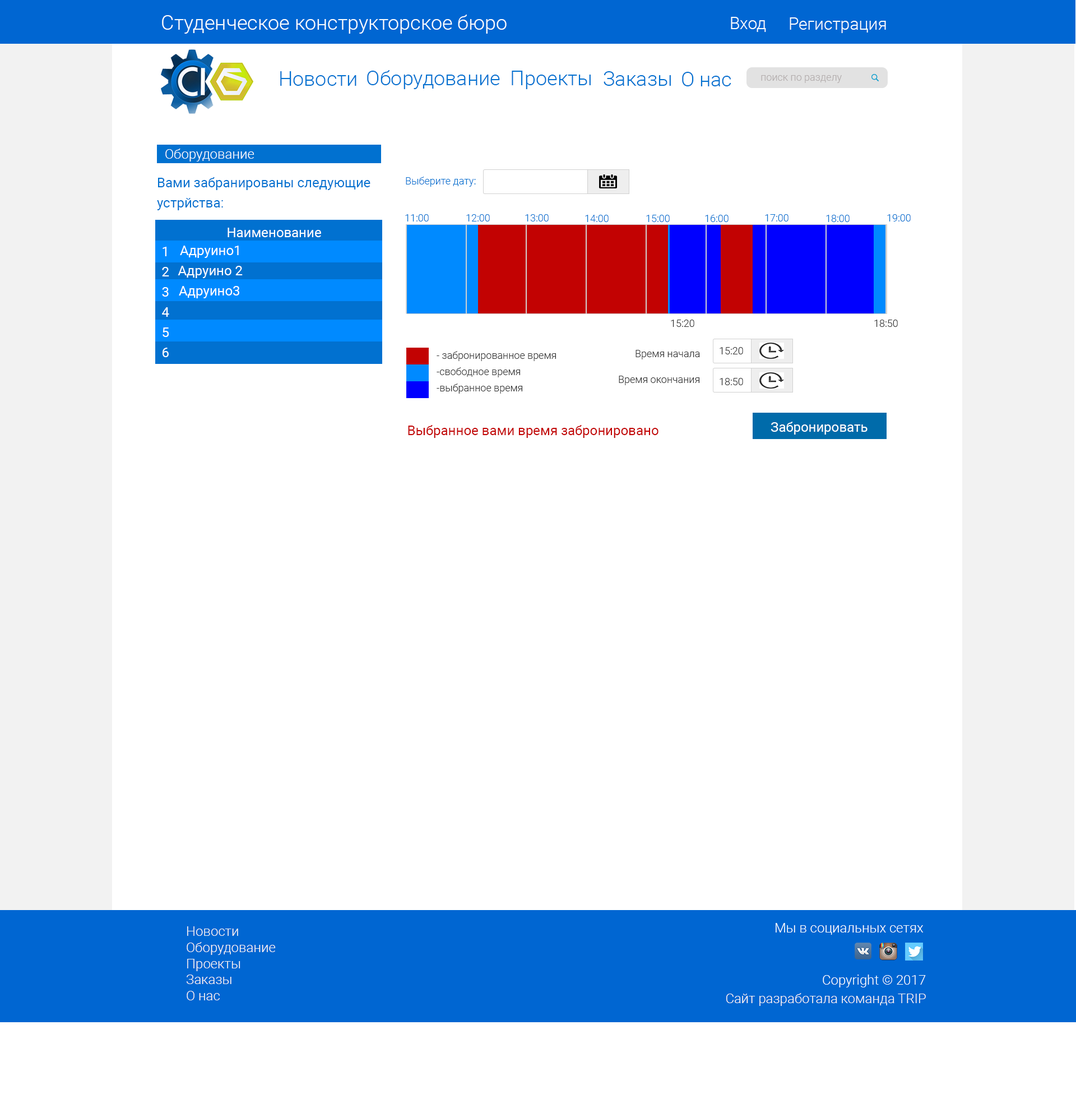
<style>
.page{position:relative;width:1076px;height:1108px;background:#ffffff}
.page>*{position:absolute;margin:0}
.t1{font:20.2px "Roboto-Light";color:#f8fdff}
.t2{font:16.8px "Roboto-Light";color:#f8fdff}
.t3{font:20.2px "Roboto-Light";color:#0171d0}
.t4{font:10.1px "Roboto-Light";color:#b3adad}
.t5{font:13.5px "Roboto-Light";color:#ffffff}
.t6{font:13.5px/20.2px "Roboto-Regular";color:#0171d0}
.t7{font:10.1px "Roboto-Light";color:#0171d0}
.t8{font:13.5px "Roboto-Regular";color:#ffffff}
.t9{font:13.5px/20.2px "Roboto-Regular";color:#ffffff}
.t10{font:10.1px "Roboto-Light";color:#333333}
.t11{font:13.5px "Roboto-Regular";color:#c20202}
.t12{font:13.5px "Roboto-Light";color:#f8f3f3}
.t13{font:13.5px "Roboto-Light";color:#f8fdff}
</style>
<div class="page">
<p class="t1" style="left:162px;top:15px;width:345px;height:19px">Студенческое конструкторское бюро</p>
<p class="t2" style="left:731px;top:17px;width:35px;height:15px">Вход</p>
<p class="t2" style="left:790px;top:17px;width:96px;height:16px">Регистрация</p>
<p class="t3" style="left:280px;top:71px;width:77px;height:15px">Новости</p>
<p class="t3" style="left:367px;top:70px;width:133px;height:19px">Оборудование</p>
<p class="t3" style="left:512px;top:71px;width:79px;height:18px">Проекты</p>
<p class="t3" style="left:604px;top:71px;width:67px;height:15px">Заказы</p>
<p class="t3" style="left:682px;top:72px;width:50px;height:14px">О нас</p>
<p class="t4" style="left:761px;top:75px;width:81px;height:8px">поиск по разделу</p>
<p class="t5" style="left:165px;top:149px;width:90px;height:12px">Оборудование</p>
<p class="t6" style="left:157px;top:177px;width:214px;height:33px">Вами забранированы следующие <br>устрйства:</p>
<p class="t7" style="left:406px;top:177px;width:70px;height:10px">Выберите дату:</p>
<p class="t7" style="left:405px;top:214px;width:24px;height:7px">11:00</p>
<p class="t7" style="left:466px;top:214px;width:24px;height:7px">12:00</p>
<p class="t7" style="left:525px;top:214px;width:24px;height:7px">13:00</p>
<p class="t7" style="left:585px;top:215px;width:24px;height:7px">14:00</p>
<p class="t7" style="left:646px;top:215px;width:24px;height:7px">15:00</p>
<p class="t7" style="left:705px;top:215px;width:24px;height:7px">16:00</p>
<p class="t7" style="left:765px;top:214px;width:24px;height:7px">17:00</p>
<p class="t7" style="left:826px;top:215px;width:24px;height:7px">18:00</p>
<p class="t7" style="left:887px;top:214px;width:24px;height:7px">19:00</p>
<p class="t8" style="left:228px;top:228px;width:93px;height:9px">Наименование</p>
<p class="t8" style="left:180px;top:246px;width:59px;height:12px">Адруино1</p>
<p class="t9" style="left:162px;top:247px;width:7px;height:110px;text-align:center">1<br>2<br>3<br>4<br>5<br>6</p>
<p class="t8" style="left:178px;top:266px;width:65px;height:12px">Адруино 2</p>
<p class="t8" style="left:179px;top:286px;width:60px;height:12px">Адруино3</p>
<p class="t10" style="left:671px;top:320px;width:24px;height:7px">15:20</p>
<p class="t10" style="left:875px;top:320px;width:23px;height:7px">18:50</p>
<p class="t10" style="left:437px;top:351px;width:119px;height:10px">- забронированное время</p>
<p class="t10" style="left:636px;top:350px;width:64px;height:9px">Время начала</p>
<p class="t10" style="left:720px;top:347px;width:23px;height:7px">15:20</p>
<p class="t10" style="left:437px;top:367px;width:83px;height:10px">-свободное время</p>
<p class="t10" style="left:619px;top:376px;width:81px;height:9px">Время окончания</p>
<p class="t10" style="left:720px;top:378px;width:23px;height:7px">18:50</p>
<p class="t10" style="left:437px;top:383px;width:86px;height:11px">-выбранное время</p>
<p class="t11" style="left:408px;top:425px;width:251px;height:13px">Выбранное вами время забронировано</p>
<p class="t8" style="left:771px;top:422px;width:97px;height:12px">Забронировать</p>
<p class="t12" style="left:187px;top:926px;width:89px;height:74px">Новости<br>Оборудование<br>Проекты<br>Заказы<br>О нас</p>
<p class="t13" style="left:776px;top:923px;width:148px;height:12px">Мы в социальных сетях</p>
<p class="t13" style="left:823px;top:974px;width:103px;height:13px">Copyright © 2017</p>
<p class="t12" style="left:726px;top:993px;width:200px;height:13px">Сайт разработала команда TRIP</p>
</div>
